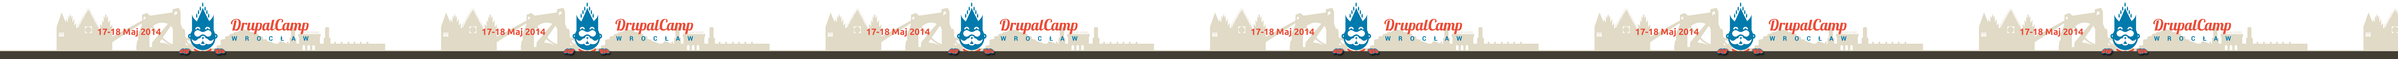
<style>
.page{position:relative;width:2398px;height:59px;background:#ffffff}
.page>*{position:absolute;margin:0}
.t1{font:9px "Ubuntu-Bold";color:#eb4e3a}
</style>
<div class="page">
<p class="t1" style="left:98px;top:28px;width:63px;height:9px">17-18 Maj 2014</p>
<p class="t1" style="left:482px;top:28px;width:63px;height:9px">17-18 Maj 2014</p>
<p class="t1" style="left:867px;top:28px;width:63px;height:9px">17-18 Maj 2014</p>
<p class="t1" style="left:1251px;top:28px;width:63px;height:9px">17-18 Maj 2014</p>
<p class="t1" style="left:1636px;top:28px;width:63px;height:9px">17-18 Maj 2014</p>
<p class="t1" style="left:2020px;top:28px;width:63px;height:9px">17-18 Maj 2014</p>
</div>
